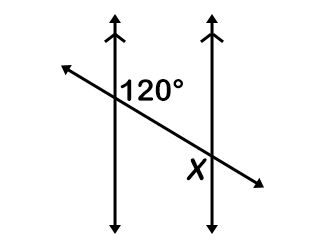
<style>
.page{position:relative;width:320px;height:240px;background:#ffffff}
.page>*{position:absolute;margin:0}
.t1{font:30px "ArialRoundedMTBold";color:#000000}
.t2{font:30px "ArialRoundedMTBold";color:#000000;font-style:italic}
</style>
<div class="page">
<p class="t1" style="left:120px;top:79px;width:63px;height:22px">120°</p>
<p class="t2" style="left:186px;top:158px;width:21px;height:23px">X</p>
</div>
